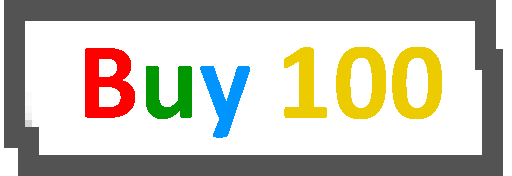
<style>
.page{position:relative;width:512px;height:176px;background:#ffffff}
.page>*{position:absolute;margin:0}
.t1{font:110.7px "Calibri-Bold";color:#eccc00}
.t2{font:110.7px "Calibri-Bold";color:#ff0000}
.t3{font:110.7px "Calibri-Bold";color:#009700}
.t4{font:110.7px "Calibri-Bold";color:#0094ff}
</style>
<div class="page">
<p class="t1" style="left:85px;top:47px;width:357px;height:91px"><span class="t2">B</span><span class="t3">u</span><span class="t4">y </span>100</p>
</div>
